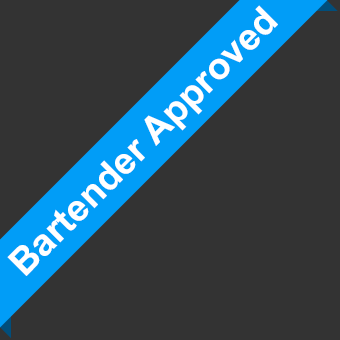
<style>
.page{position:relative;width:340px;height:340px;background:#333333}
.page>*{position:absolute;margin:0}
.t1{font:37.5px "Arial-BoldMT";color:#ffffff}
</style>
<div class="page">
<p class="t1" style="left:7px;top:5px;width:271px;height:271px;rotate:-45deg">Bartender Approved</p>
</div>
